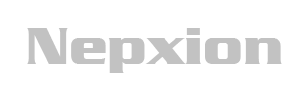
<style>
.page{position:relative;width:302px;height:91px;background:#ffffff}
.page>*{position:absolute;margin:0}
.t1{font:53.3px "SerpentineD-Bold";color:#c2c2c2}
</style>
<div class="page">
<p class="t1" style="left:27px;top:28px;width:255px;height:45px">Nepxion</p>
</div>
